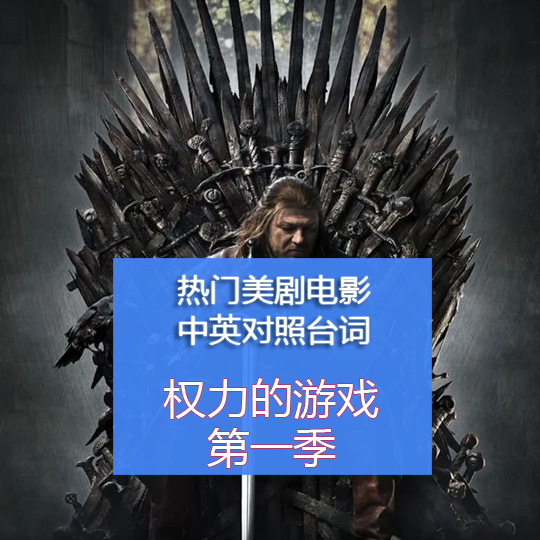
<style>
.page{position:relative;width:540px;height:540px}
.page>*{position:absolute;margin:0}
.t1{font:30.6px/39.1px "MicrosoftYaHei";color:#ffffff;scale:1.06 1}
.t2{font:40.8px/49.1px "MicrosoftYaHei";color:#ffffff;scale:1.06 1}
</style>
<div class="page">
<p class="t1" style="left:178px;top:275px;width:193px;height:70px">热门美剧电影<br>中英对照台词</p>
<p class="t2" style="left:163px;top:378px;width:216px;height:90px;text-align:center">权力的游戏<br>第一季</p>
</div>
